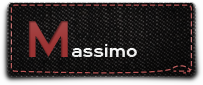
<style>
.page{position:relative;width:203px;height:85px}
.page>*{position:absolute;margin:0}
.t1{font:53.7px "HighwayGothicExpanded";letter-spacing:-0.025em;color:#9a3131}
.t2{font:19px "HighwayGothicExpanded";letter-spacing:-0.025em;color:#ffffff}
</style>
<div class="page">
<p class="t1" style="left:28px;top:21px;width:40px;height:36px">M</p>
<p class="t2" style="left:72px;top:44px;width:65px;height:13px">assimo</p>
</div>
